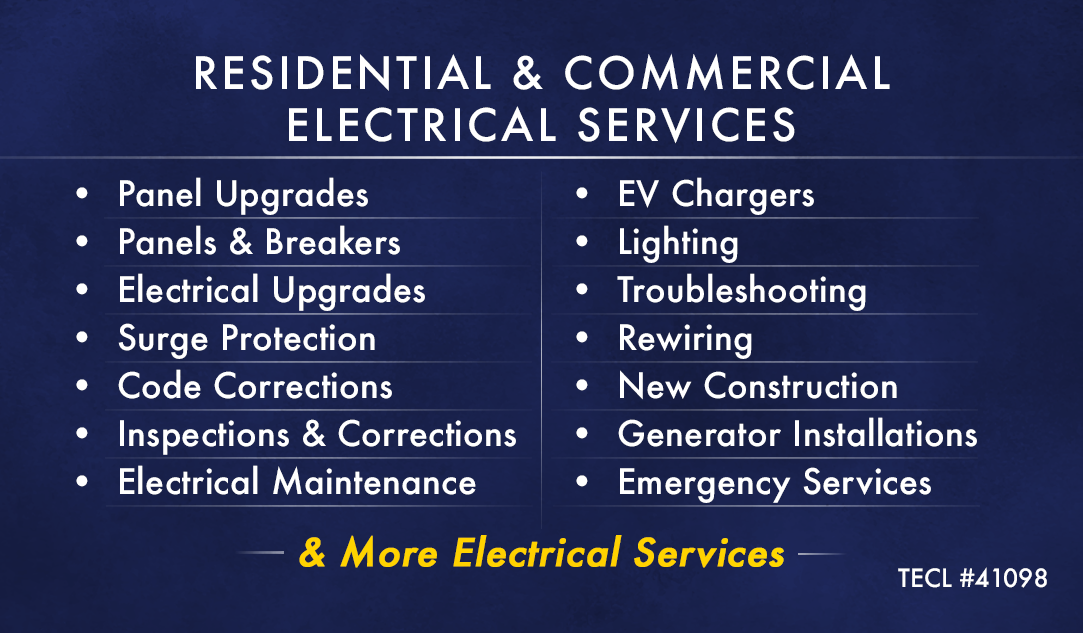
<style>
.page{position:relative;width:1083px;height:633px}
.page>*{position:absolute;margin:0}
.t1{font:43.5px "Futura-Medium";letter-spacing:0.075em;color:#ffffff}
.t2{font:34.2px/48px "Futura-Medium";letter-spacing:0.01em;color:#ffffff}
.t3{font:37.6px "Futura-Medium";letter-spacing:0.01em;color:#ffd200;font-weight:bold;font-style:italic}
.t4{font:24.4px "Futura-Medium";color:#ffffff}
</style>
<div class="page">
<p class="t1" style="left:196px;top:53px;width:694px;height:91px;text-align:center">RESIDENTIAL &amp; COMMERCIAL<br>ELECTRICAL SERVICES</p>
<p class="t2" style="left:76px;top:177px;width:440px;height:318px">Panel Upgrades<br>Panels &amp; Breakers<br>Electrical Upgrades<br>Surge Protection<br>Code Corrections<br>Inspections &amp; Corrections<br>Electrical Maintenance</p>
<p class="t2" style="left:576px;top:177px;width:401px;height:326px">EV Chargers<br>Lighting<br>Troubleshooting<br>Rewiring<br>New Construction<br>Generator Installations<br>Emergency Services</p>
<p class="t3" style="left:299px;top:535px;width:485px;height:33px">&amp; More Electrical Services</p>
<p class="t4" style="left:898px;top:567px;width:149px;height:21px">TECL #41098</p>
</div>
